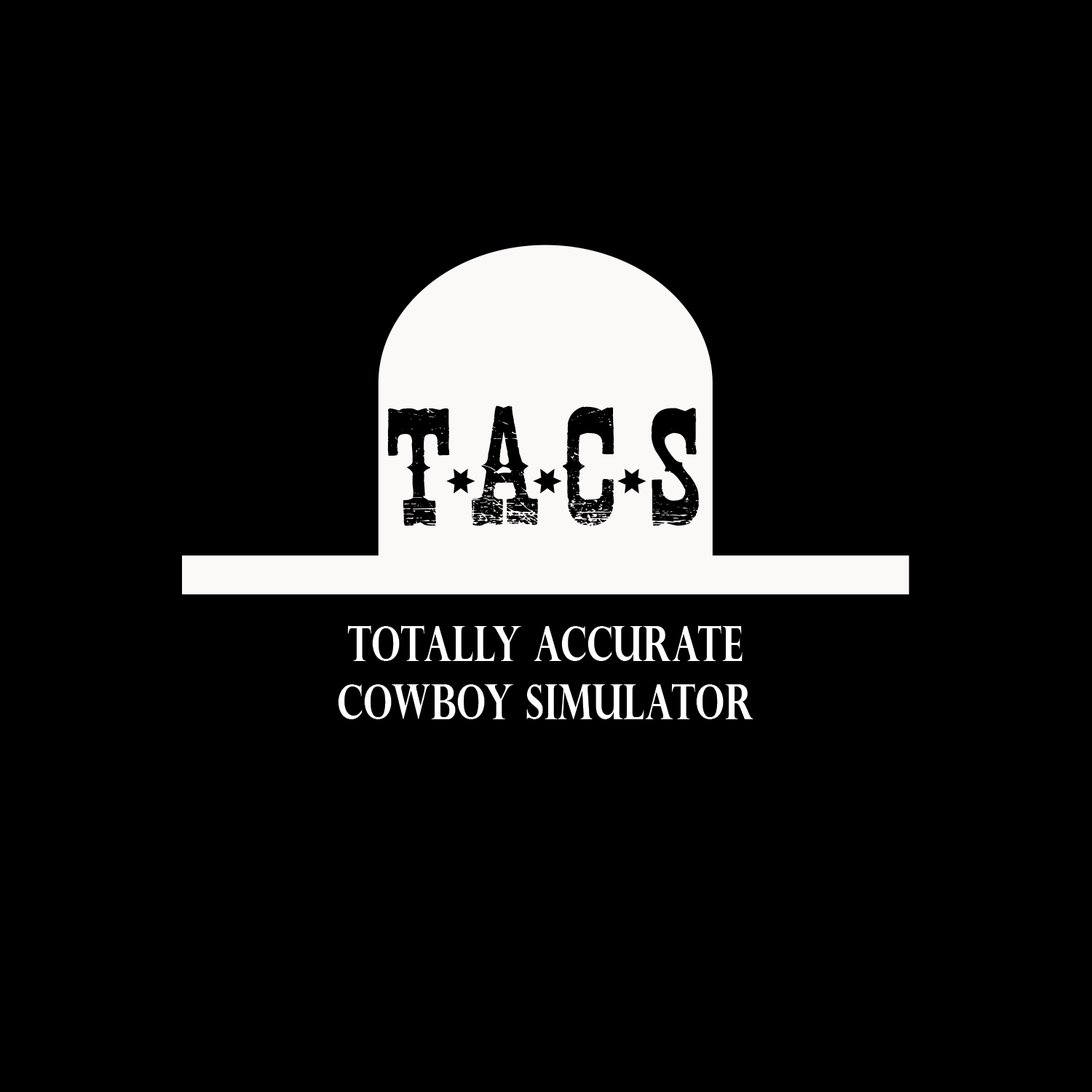
<style>
.page{position:relative;width:1092px;height:1092px;background:#000000}
.page>*{position:absolute;margin:0}
.t1{font:48.5px "PerpetuaTitlingMT-Bold";color:#ffffff;scale:0.74 1}
</style>
<div class="page">
<p class="t1" style="left:338px;top:625px;width:415px;height:94px;text-align:center">Totally Accurate<br>Cowboy Simulator</p>
</div>
